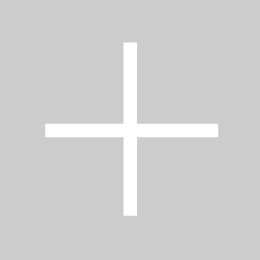
<style>
.page{position:relative;width:260px;height:260px;background:#cccccc}
.page>*{position:absolute;margin:0}
.t1{font:250px "ShanHeiSun-Light";color:#ffffff}
</style>
<div class="page">
<p class="t1" style="left:45px;top:42px;width:174px;height:174px">＋</p>
</div>
